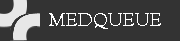
<style>
.page{position:relative;width:180px;height:41px;background:#333333}
.page>*{position:absolute;margin:0}
.t1{font:20px "GoudyOldStyleT-Regular";color:#ffffff}
</style>
<div class="page">
<p class="t1" style="left:49px;top:13px;width:112px;height:16px">MEDQUEUE</p>
</div>
